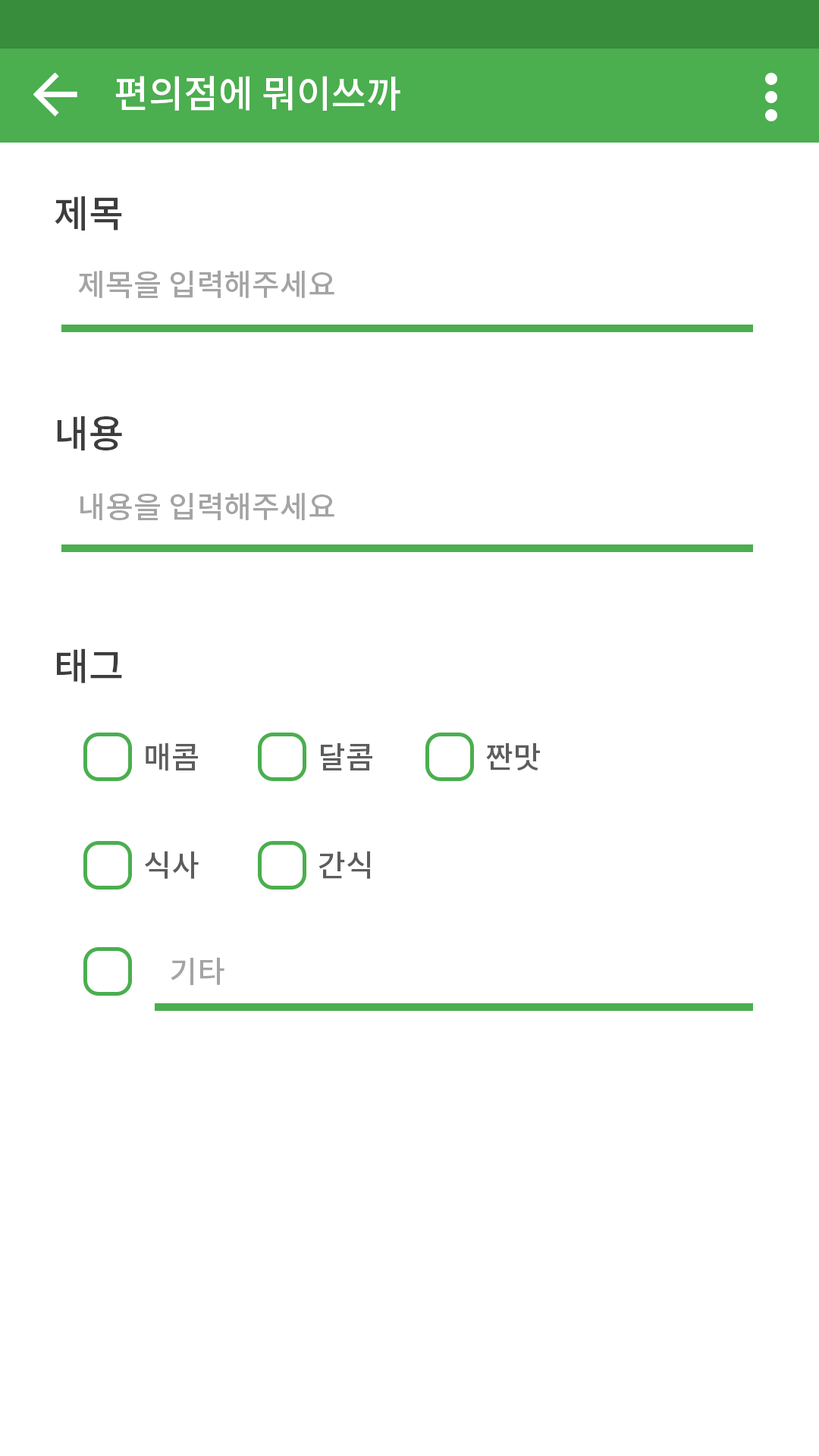
<style>
.page{position:relative;width:819px;height:1456px;background:#ffffff}
.page>*{position:absolute;margin:0}
.t1{font:37.9px "NotoSansCJKkr-Medium";color:#ffffff}
.t2{font:37.9px "NotoSansCJKkr-Medium";color:#3d3d3d}
.t3{font:30.3px "NotoSansCJKkr-Medium";color:#a4a4a4}
.t4{font:30.3px "NotoSansCJKkr-Medium";color:#5d5d5d}
</style>
<div class="page">
<p class="t1" style="left:115px;top:76px;width:285px;height:35px">편의점에 뭐이쓰까</p>
<p class="t2" style="left:55px;top:196px;width:67px;height:35px">제목</p>
<p class="t3" style="left:78px;top:270px;width:256px;height:29px">제목을 입력해주세요</p>
<p class="t2" style="left:57px;top:416px;width:65px;height:34px">내용</p>
<p class="t3" style="left:80px;top:492px;width:254px;height:28px">내용을 입력해주세요</p>
<p class="t2" style="left:57px;top:648px;width:65px;height:35px">태그</p>
<p class="t4" style="left:146px;top:743px;width:52px;height:28px">매콤</p>
<p class="t4" style="left:321px;top:743px;width:51px;height:27px">달콤</p>
<p class="t4" style="left:486px;top:743px;width:54px;height:27px">짠맛</p>
<p class="t4" style="left:145px;top:851px;width:54px;height:28px">식사</p>
<p class="t4" style="left:318px;top:851px;width:52px;height:28px">간식</p>
<p class="t3" style="left:171px;top:957px;width:53px;height:28px">기타</p>
</div>
